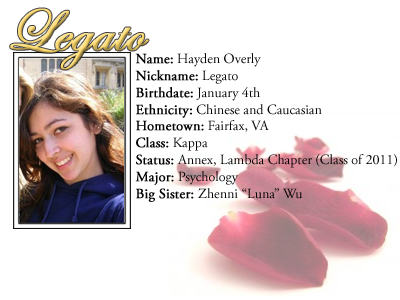
<style>
.page{position:relative;width:400px;height:300px;background:#ffffff}
.page>*{position:absolute;margin:0}
.t1{font:60px "EdwardianScriptITC";font-weight:bold}
.t2{font:14px "AGaramondPro-Regular";color:#000000}
.t3{font:14px "AGaramondPro-Regular";color:#000000;font-weight:bold}
</style>
<div class="page">
<p class="t1" style="left:10px;top:8px;width:139px;height:62px">Legato</p>
<p class="t2" style="left:135px;top:53px;width:262px;height:149px"><span class="t3">Name:</span> Hayden Overly<br><span class="t3">Nickname:</span> Legato<br><span class="t3">Birthdate:</span> January 4th<br><span class="t3">Ethnicity:</span> Chinese and Caucasian<br><span class="t3">Hometown:</span> Fairfax, VA<br><span class="t3">Class:</span> Kappa<br><span class="t3">Status: </span>Annex, Lambda Chapter (Class of 2011)<br><span class="t3">Major:</span> Psychology<br><span class="t3">Big Sister: </span>Zhenni “Luna” Wu</p>
</div>
